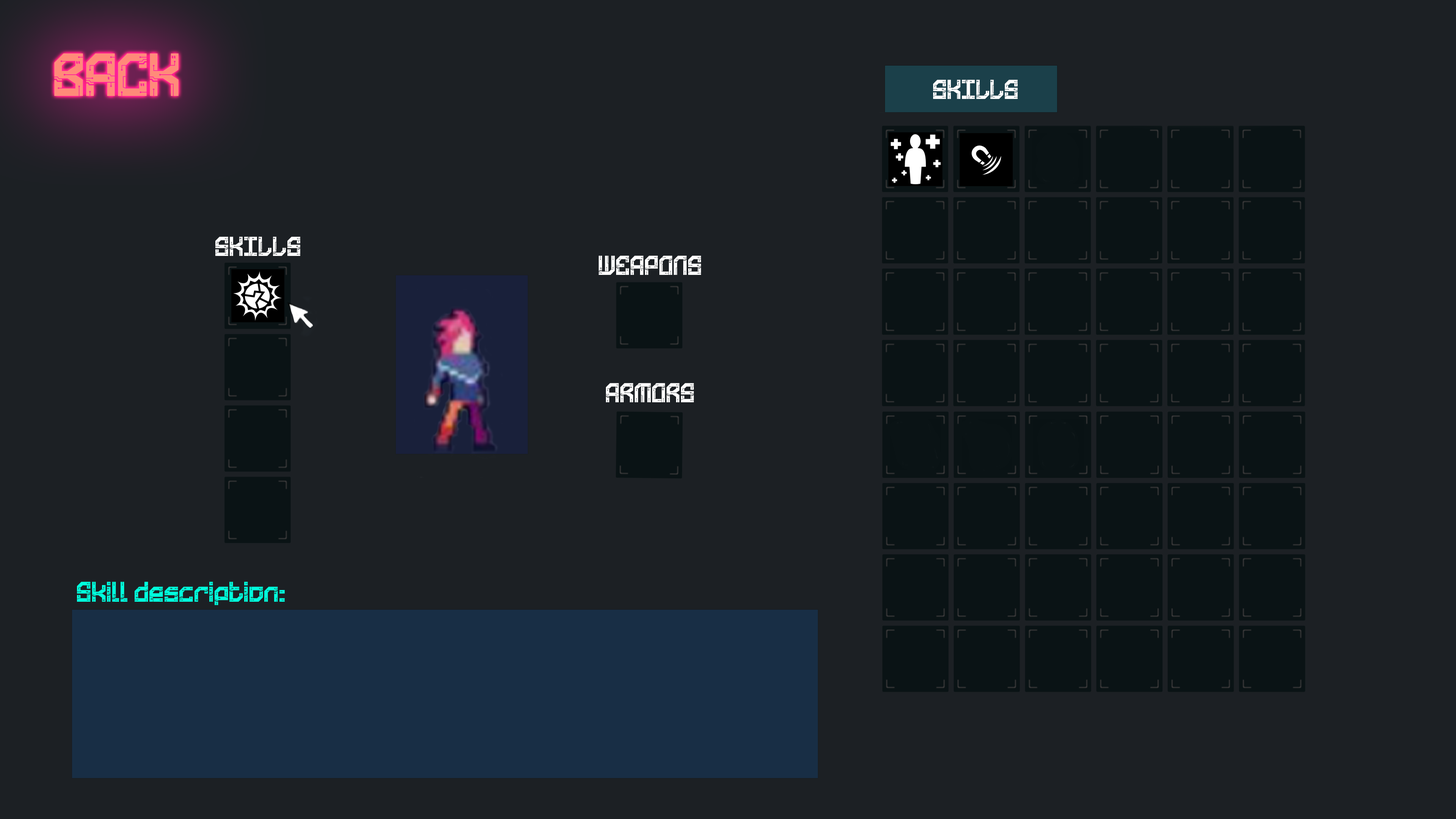
<style>
.page{position:relative;width:1456px;height:819px;background:#1c2024}
.page>*{position:absolute;margin:0}
.t1{font:60.7px "TechnoBoardRegular";color:#ff8b78}
.t2{font:27.3px "TechnoBoardRegular";color:#ffffff}
.t3{font:28.4px "TechnoBoardRegular";color:#00ffdd}
</style>
<div class="page">
<p class="t1" style="left:54px;top:53px;width:125px;height:43px">BACK</p>
<p class="t2" style="left:933px;top:80px;width:85px;height:19px">SKILLS</p>
<p class="t2" style="left:215px;top:237px;width:85px;height:19px">SKILLS</p>
<p class="t2" style="left:599px;top:256px;width:102px;height:19px">WEAPONS</p>
<p class="t2" style="left:606px;top:383px;width:88px;height:19px">ARMORS</p>
<p class="t3" style="left:77px;top:582px;width:208px;height:23px">Skill description:</p>
</div>
